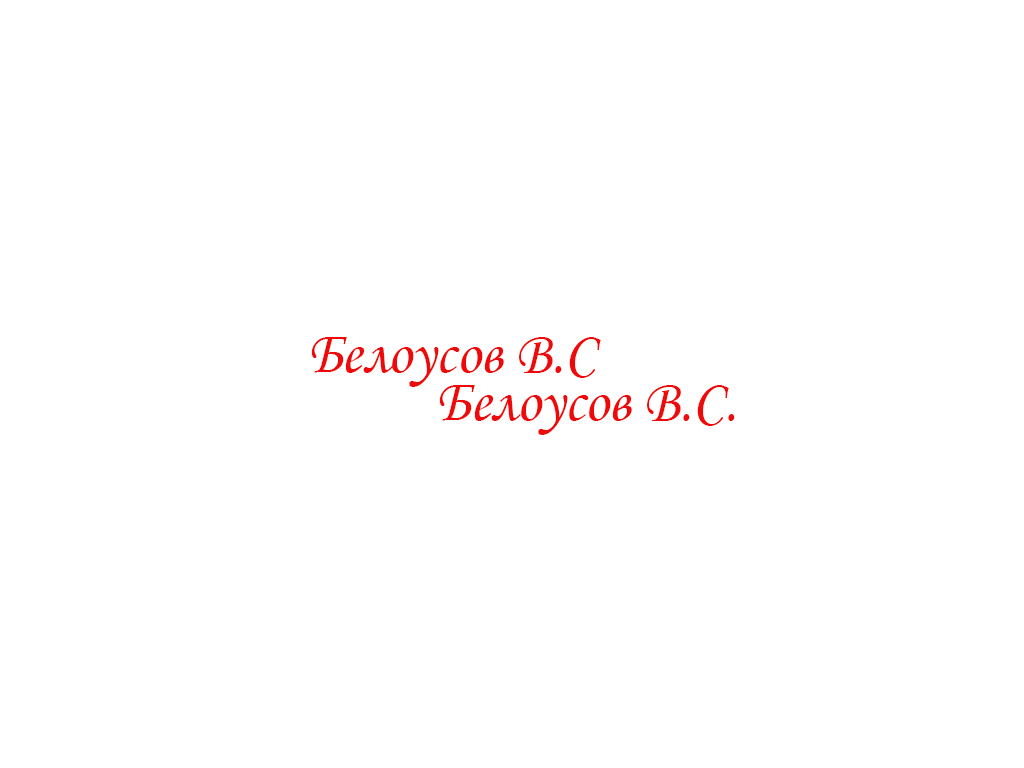
<style>
.page{position:relative;width:1024px;height:768px;background:#ffffff}
.page>*{position:absolute;margin:0}
.t1{font:60px "MonotypeCorsiva";color:#ee0a0a}
</style>
<div class="page">
<p class="t1" style="left:439px;top:385px;width:296px;height:50px">Белоусов В.С.</p>
</div>
